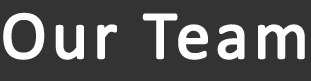
<style>
.page{position:relative;width:311px;height:81px;background:#333333}
.page>*{position:absolute;margin:0}
.t1{font:68.8px "Calibri";letter-spacing:0.05em;color:#fefefe;font-weight:bold}
</style>
<div class="page">
<p class="t1" style="left:3px;top:12px;width:302px;height:48px">Our Team</p>
</div>
